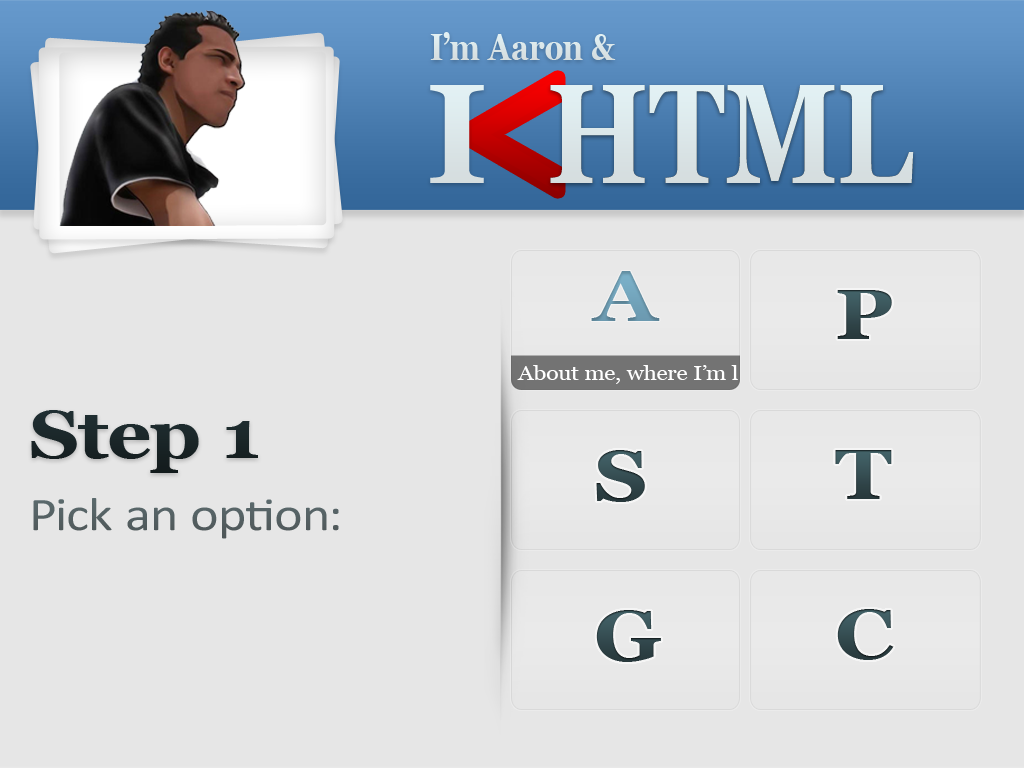
<style>
.page{position:relative;width:1024px;height:768px;background:#e6e6e6}
.page>*{position:absolute;margin:0}
.t1{font:38.3px "Georgia-Bold";color:#d9e3e6;scale:0.79 1}
.t2{font:207px "Georgia-Bold";letter-spacing:-0.22em;scale:0.86 1}
.t3{font:141px "Georgia-Bold";letter-spacing:-0.22em;color:#dce7ea}
.t4{font:141.4px "Georgia-Bold";color:#dce8ea;scale:0.79 1}
.t5{font:72px "Georgia-Bold";color:#6e9db4;scale:1.15 1}
.t6{font:69.7px "Georgia-Bold";color:#365054;scale:1.19 1}
.t7{font:20px "Georgia";color:#ffffff;scale:1.15 1}
.t8{font:68.2px "Georgia-Bold";color:#1a2628;scale:1.15 1}
.t9{font:72px "Georgia-Bold";color:#334a4f;scale:1.15 1}
.t10{font:47.1px "Calibri";color:#556063;scale:1.15 1}
.t11{font:72px "Georgia-Bold";color:#31464b;scale:1.15 1}
.t12{font:69.7px "Georgia-Bold";color:#334b4f;scale:1.19 1}
</style>
<div class="page">
<p class="t1" style="left:430px;top:32px;width:186px;height:28px">I’m Aaron &amp;</p>
<p class="t2" style="left:472px;top:77px;width:87px;height:115px">&lt;</p>
<p class="t3" style="left:430px;top:85px;width:54px;height:98px">I</p>
<p class="t4" style="left:550px;top:85px;width:364px;height:98px">HTML</p>
<p class="t4" style="left:550px;top:85px;width:364px;height:98px">HTML</p>
<p class="t5" style="left:591px;top:271px;width:69px;height:50px">A</p>
<p class="t6" style="left:837px;top:290px;width:55px;height:49px">P</p>
<p class="t7" style="left:517px;top:365px;width:221px;height:19px">About me, where I’m l</p>
<p class="t8" style="left:31px;top:410px;width:227px;height:63px">Step 1</p>
<p class="t9" style="left:596px;top:450px;width:49px;height:52px">S</p>
<p class="t6" style="left:835px;top:450px;width:57px;height:49px">T</p>
<p class="t10" style="left:33px;top:498px;width:306px;height:41px">Pick an option:</p>
<p class="t11" style="left:596px;top:610px;width:65px;height:52px">G</p>
<p class="t12" style="left:837px;top:609px;width:57px;height:51px">C</p>
</div>
